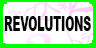
<style>
.page{position:relative;width:96px;height:48px;background:#ffffff}
.page>*{position:absolute;margin:0}
.t1{font:20px "Arial-Black";color:#050505;scale:0.54 1}
</style>
<div class="page">
<p class="t1" style="left:4px;top:16px;width:87px;height:15px">REVOLUTIONS</p>
</div>
